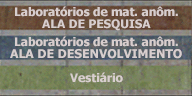
<style>
.page{position:relative;width:192px;height:96px}
.page>*{position:absolute;margin:0}
.t1{font:11.7px "Tahoma-Bold";color:#d8cece}
.t2{font:12px "Tahoma-Bold";color:#d8cece}
</style>
<div class="page">
<p class="t1" style="left:15px;top:6px;width:163px;height:11px">Laboratórios de mat. anôm.</p>
<p class="t1" style="left:42px;top:19px;width:109px;height:12px">ALA DE PESQUISA</p>
<p class="t1" style="left:15px;top:36px;width:163px;height:11px">Laboratórios de mat. anôm.</p>
<p class="t2" style="left:10px;top:49px;width:172px;height:10px">ALA DE DESENVOLVIMENTO</p>
<p class="t1" style="left:70px;top:72px;width:53px;height:11px">Vestiário</p>
</div>
